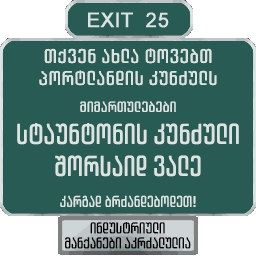
<style>
.page{position:relative;width:256px;height:256px;background:#275b53}
.page>*{position:absolute;margin:0}
.t1{font:20px/22px "ArchyEDT-Bold";letter-spacing:0.04em;color:#dce4e2}
.t2{font:15px "ArchyEDT-Bold";letter-spacing:0.02em;color:#dce4e2}
.t3{font:29px "ArchyEDT-Bold";letter-spacing:0.02em;color:#dce4e2;scale:0.9 1}
.t4{font:16px "ArchyEDT-Bold";letter-spacing:0.02em;color:#dce4e2;scale:0.9 1}
.t5{font:16px/15px "ArchyEDT-Bold";color:#000000;scale:0.9 1}
</style>
<div class="page">
<p class="t1" style="left:39px;top:48px;width:178px;height:38px;text-align:center">თქვენ ახლა ტოვებთ<br>პორტლანდის კუნძულს</p>
<p class="t2" style="left:80px;top:101px;width:96px;height:11px">მიმართულებები</p>
<p class="t3" style="left:17px;top:123px;width:222px;height:22px">სტაუნტონის კუნძული</p>
<p class="t3" style="left:55px;top:155px;width:146px;height:22px">შორსაიდ ვალე</p>
<p class="t4" style="left:60px;top:195px;width:136px;height:12px">კარგად ბრძანდებოდეთ!</p>
<p class="t5" style="left:65px;top:222px;width:126px;height:27px;text-align:center">ინდუსტრიული<br>მანქანები აკრძალულია</p>
</div>
